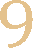
<style>
.page{position:relative;width:33px;height:48px;background:#ffffff}
.page>*{position:absolute;margin:0}
.t1{font:69.4px "CambriaMath";color:#e4c28d;scale:1.08 1}
</style>
<div class="page">
<p class="t1" style="left:0px;top:0px;width:33px;height:48px">9</p>
</div>
